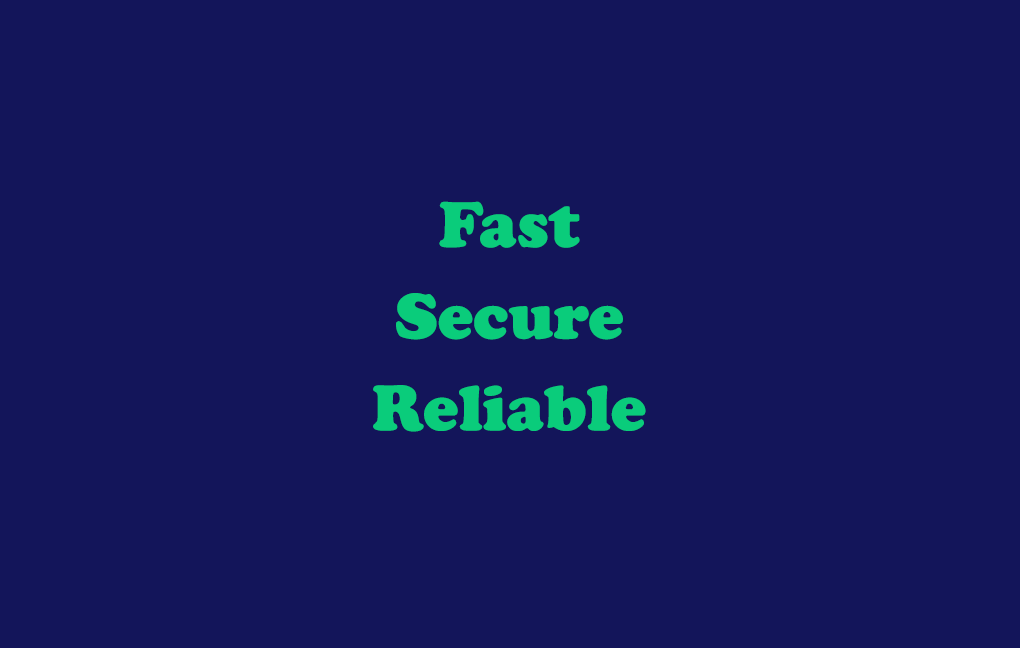
<style>
.page{position:relative;width:1020px;height:648px;background:#13155a}
.page>*{position:absolute;margin:0}
.t1{font:66.7px/91.7px "CooperBlack";color:#0acc7b}
</style>
<div class="page">
<p class="t1" style="left:373px;top:201px;width:273px;height:231px;text-align:center">Fast<br>Secure<br>Reliable</p>
</div>
